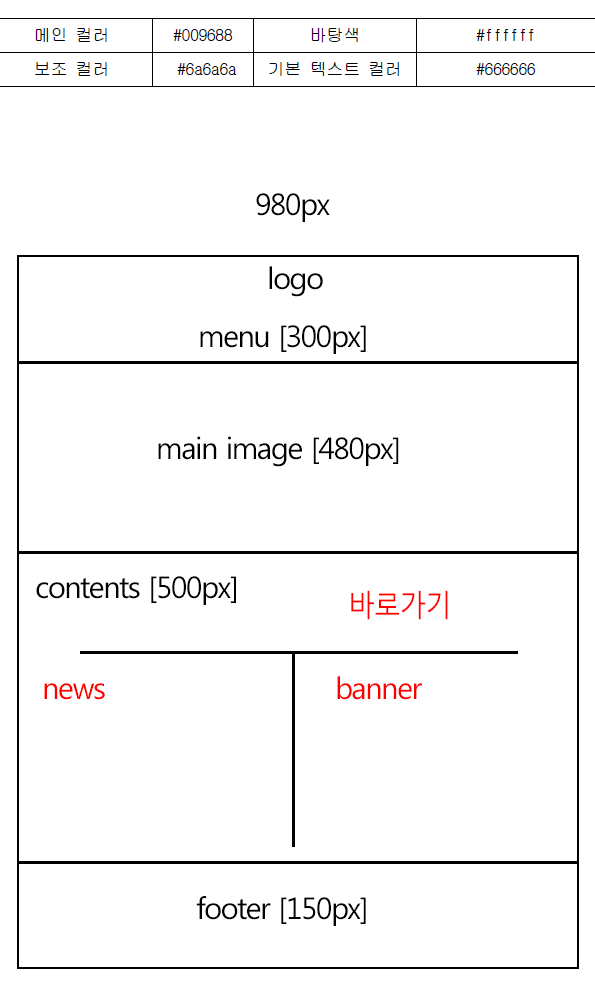
<style>
.page{position:relative;width:595px;height:1000px;background:#ffffff}
.page>*{position:absolute;margin:0}
.t1{font:30px "MalgunGothicRegular";letter-spacing:-0.05em;color:#000000}
.t2{font:30px "MalgunGothicRegular";letter-spacing:-0.05em;color:#ff0000;scale:0.9 1}
.t3{font:30px "MalgunGothicRegular";letter-spacing:-0.05em;color:#ff0000}
</style>
<div class="page">
<p class="t1" style="left:256px;top:193px;width:74px;height:29px">980px</p>
<p class="t1" style="left:269px;top:266px;width:54px;height:31px">logo</p>
<p class="t1" style="left:200px;top:325px;width:166px;height:29px">menu [300px]</p>
<p class="t1" style="left:158px;top:436px;width:241px;height:31px">main image [480px]</p>
<p class="t1" style="left:36px;top:576px;width:200px;height:29px">contents [500px]</p>
<p class="t2" style="left:351px;top:590px;width:97px;height:30px">바로가기</p>
<p class="t3" style="left:337px;top:676px;width:85px;height:24px">banner</p>
<p class="t3" style="left:44px;top:683px;width:61px;height:17px">news</p>
<p class="t1" style="left:196px;top:896px;width:170px;height:30px">footer [150px]</p>
</div>
